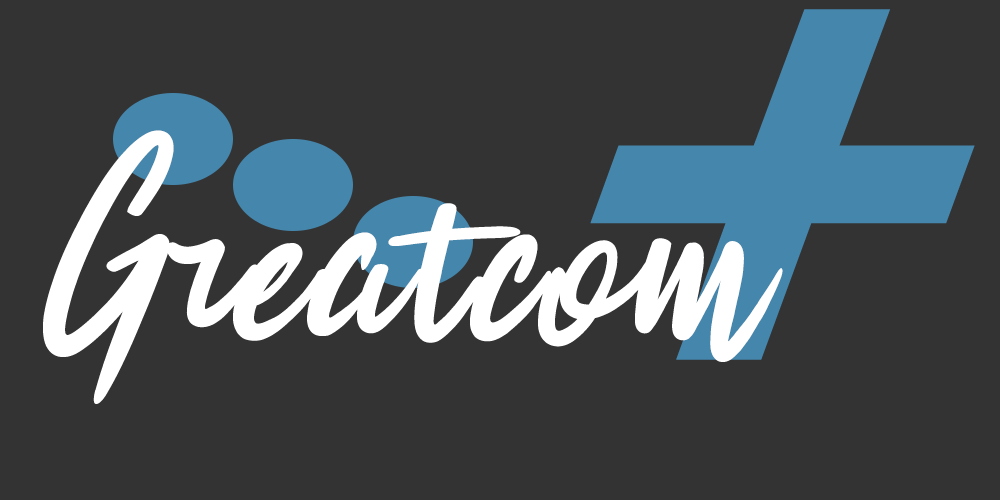
<style>
.page{position:relative;width:1000px;height:500px;background:#333333}
.page>*{position:absolute;margin:0}
.t1{font:625px "Magneto-Bold";letter-spacing:0.025em;color:#4486ac}
.t2{font:250px "BrokenHeart";letter-spacing:0.025em;color:#ffffff}
</style>
<div class="page">
<p class="t1" style="left:590px;top:9px;width:385px;height:351px">+</p>
<p class="t2" style="left:43px;top:130px;width:740px;height:274px">Greatcom</p>
</div>
